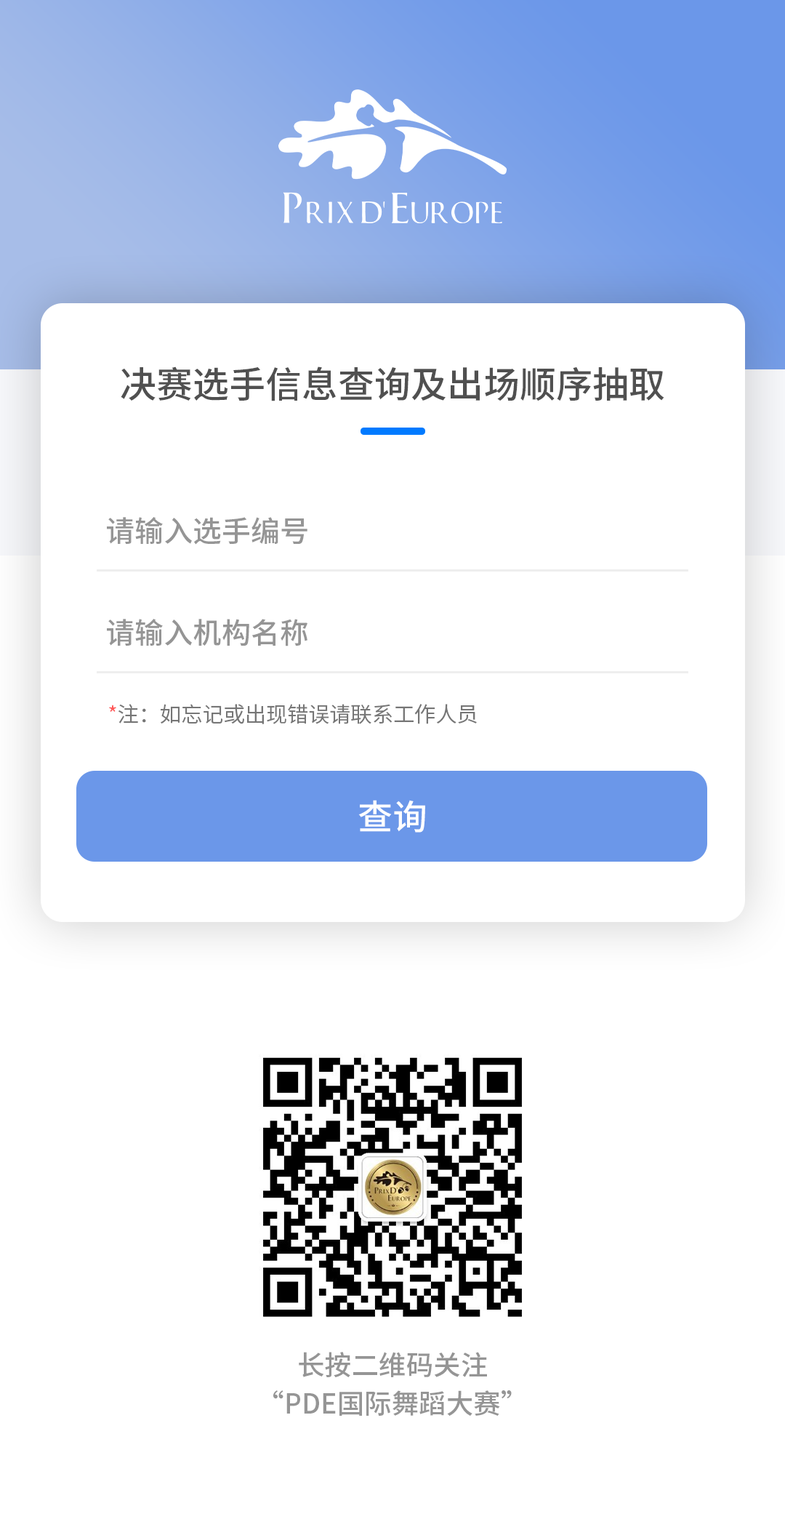
<style>
.page{position:relative;width:785px;height:1519px;background:#ffffff}
.page>*{position:absolute;margin:0}
.t1{font:36.4px "SourceHanSansCN-Medium";color:#505050}
.t2{font:29.1px "SourceHanSansCN-Medium";color:#959595}
.t3{font:21.2px "SourceHanSansCN-Normal";color:#767676}
.t4{font:34.9px "SourceHanSansCN-Medium";color:#ffffff}
.t5{font:27.3px/41.8px "SourceHanSansCN-Medium";color:#959595}
</style>
<div class="page">
<p class="t1" style="left:121px;top:366px;width:543px;height:35px">决赛选手信息查询及出场顺序抽取</p>
<p class="t2" style="left:107px;top:517px;width:201px;height:28px">请输入选手编号</p>
<p class="t2" style="left:107px;top:619px;width:201px;height:27px">请输入机构名称</p>
<p class="t3" style="left:109px;top:704px;width:368px;height:20px">*注：如忘记或出现错误请联系工作人员</p>
<p class="t4" style="left:358px;top:800px;width:67px;height:32px">查询</p>
<p class="t5" style="left:273px;top:1351px;width:239px;height:64px;text-align:center">长按二维码关注<br>“PDE国际舞蹈大赛”</p>
</div>
